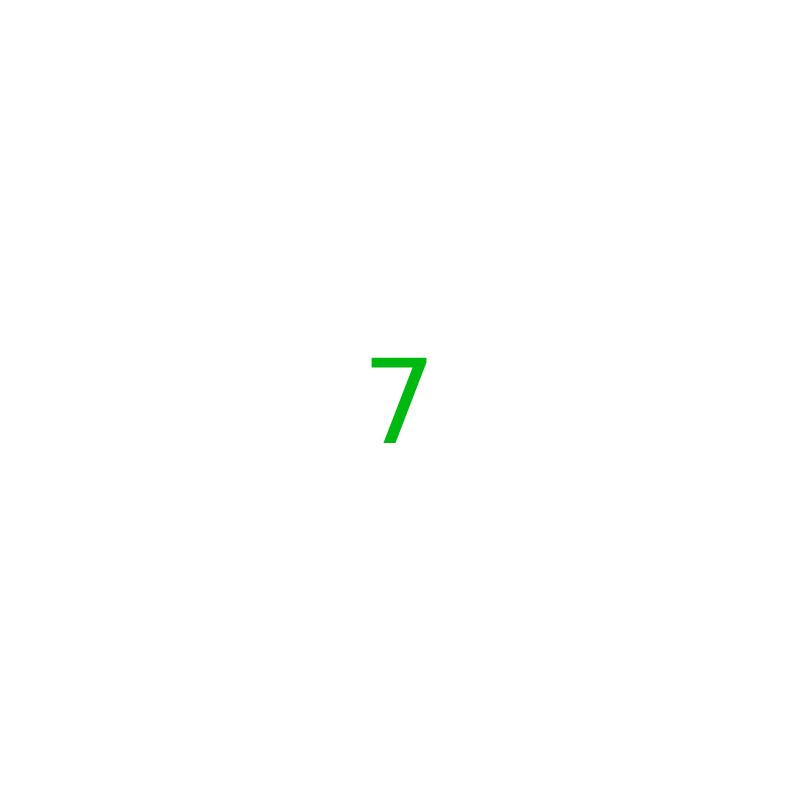
<style>
.page{position:relative;width:800px;height:800px;background:#ffffff}
.page>*{position:absolute;margin:0}
.t1{font:117px "DejaVuSans";color:#00b910}
</style>
<div class="page">
<p class="t1" style="left:371px;top:357px;width:56px;height:86px">7</p>
</div>
